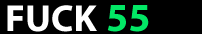
<style>
.page{position:relative;width:202px;height:34px;background:#000000}
.page>*{position:absolute;margin:0}
.t1{font:38px "MyriadPro-Bold";color:#ffffff}
.t2{font:40px "MyriadPro-Bold";color:#02e765}
</style>
<div class="page">
<p class="t1" style="left:7px;top:5px;width:90px;height:27px">FUCK</p>
<p class="t2" style="left:107px;top:5px;width:42px;height:27px">55</p>
</div>
